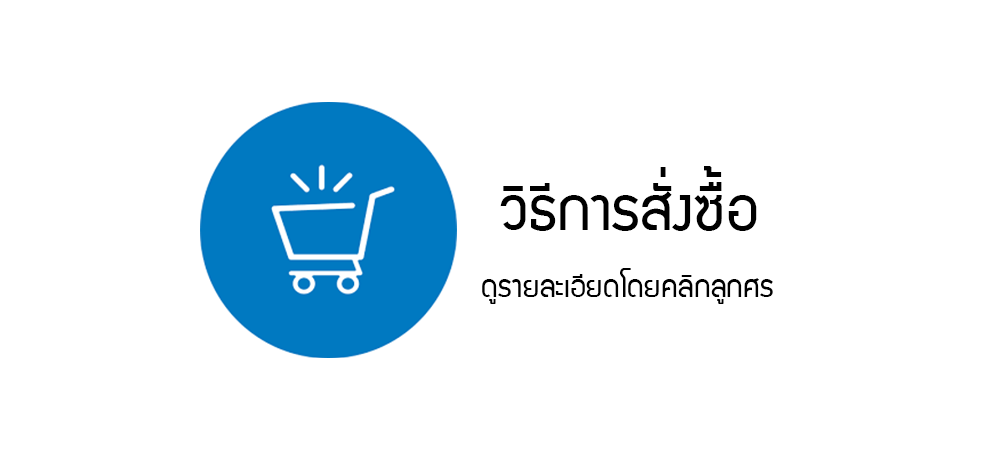
<style>
.page{position:relative;width:1000px;height:460px;background:#ffffff}
.page>*{position:absolute;margin:0}
.t1{font:66.7px "supermarket";color:#000000}
.t2{font:33.3px "supermarket";color:#000000}
</style>
<div class="page">
<p class="t1" style="left:500px;top:166px;width:257px;height:65px">วิธีการสั่งซื้อ</p>
<p class="t2" style="left:482px;top:268px;width:291px;height:36px">ดูรายละเอียดโดยคลิกลูกศร</p>
</div>
